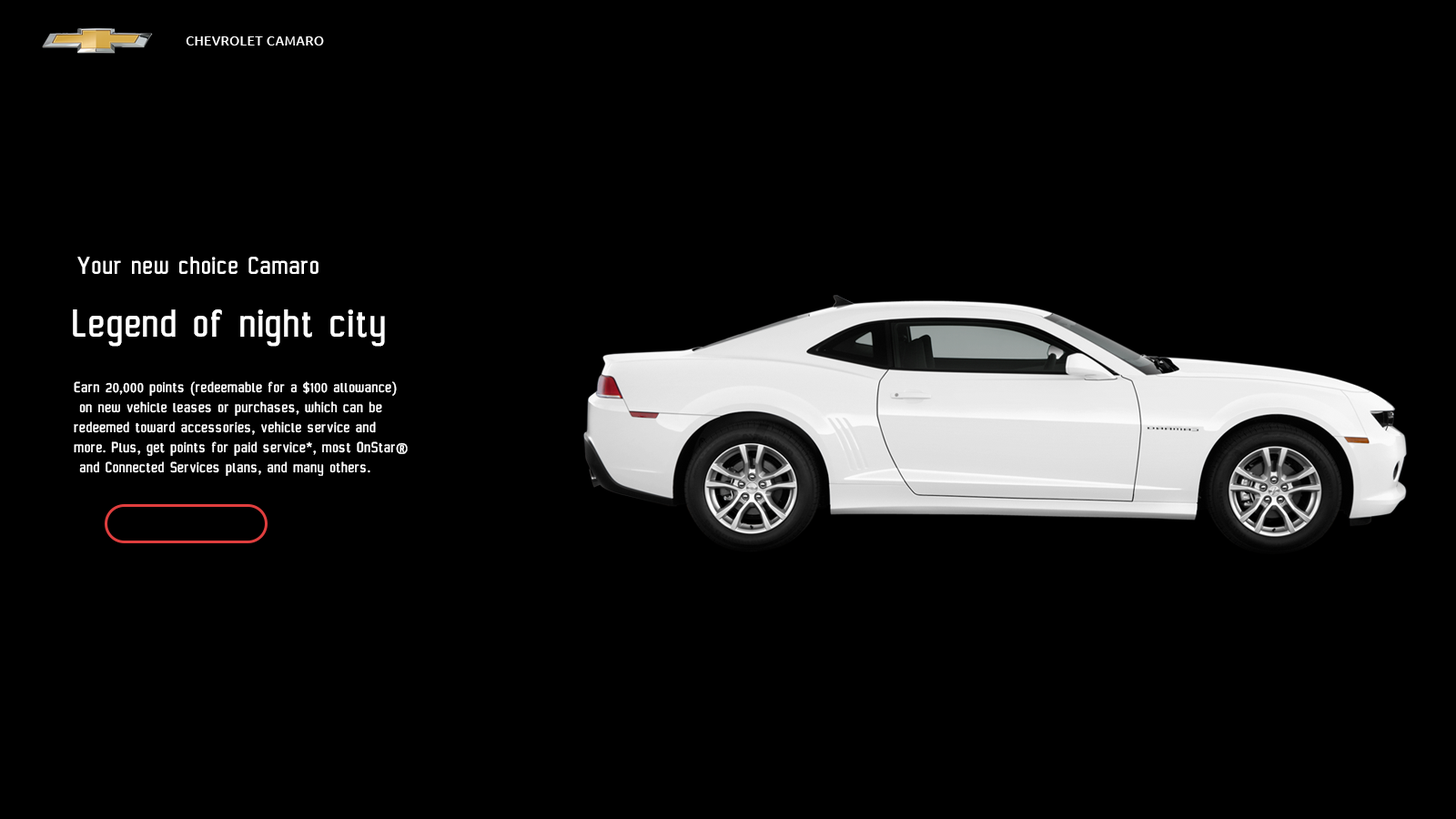
<style>
.page{position:relative;width:1456px;height:819px;background:#000000}
.page>*{position:absolute;margin:0}
.t1{font:12.7px "Ubuntu";letter-spacing:0.05em;color:#ffffff;text-transform:uppercase}
.t2{font:27.3px "Uroob";letter-spacing:0.05em;color:#ffffff}
.t3{font:43.7px "Uroob";letter-spacing:0.05em;color:#ffffff}
.t4{font:16.4px/20px "Uroob";letter-spacing:0.05em;color:#ffffff}
</style>
<div class="page">
<p class="t1" style="left:186px;top:36px;width:138px;height:9px">Chevrolet Camaro</p>
<p class="t2" style="left:77px;top:257px;width:241px;height:17px">Your new choice Camaro</p>
<p class="t3" style="left:73px;top:309px;width:312px;height:38px">Legend of night city</p>
<p class="t4" style="left:74px;top:381px;width:334px;height:95px">Earn 20,000 points (redeemable for a $100 allowance)<br> on new vehicle leases or purchases, which can be <br>redeemed toward accessories, vehicle service and <br>more. Plus, get points for paid service*, most OnStar®<br> and Connected Services plans, and many others.</p>
</div>
